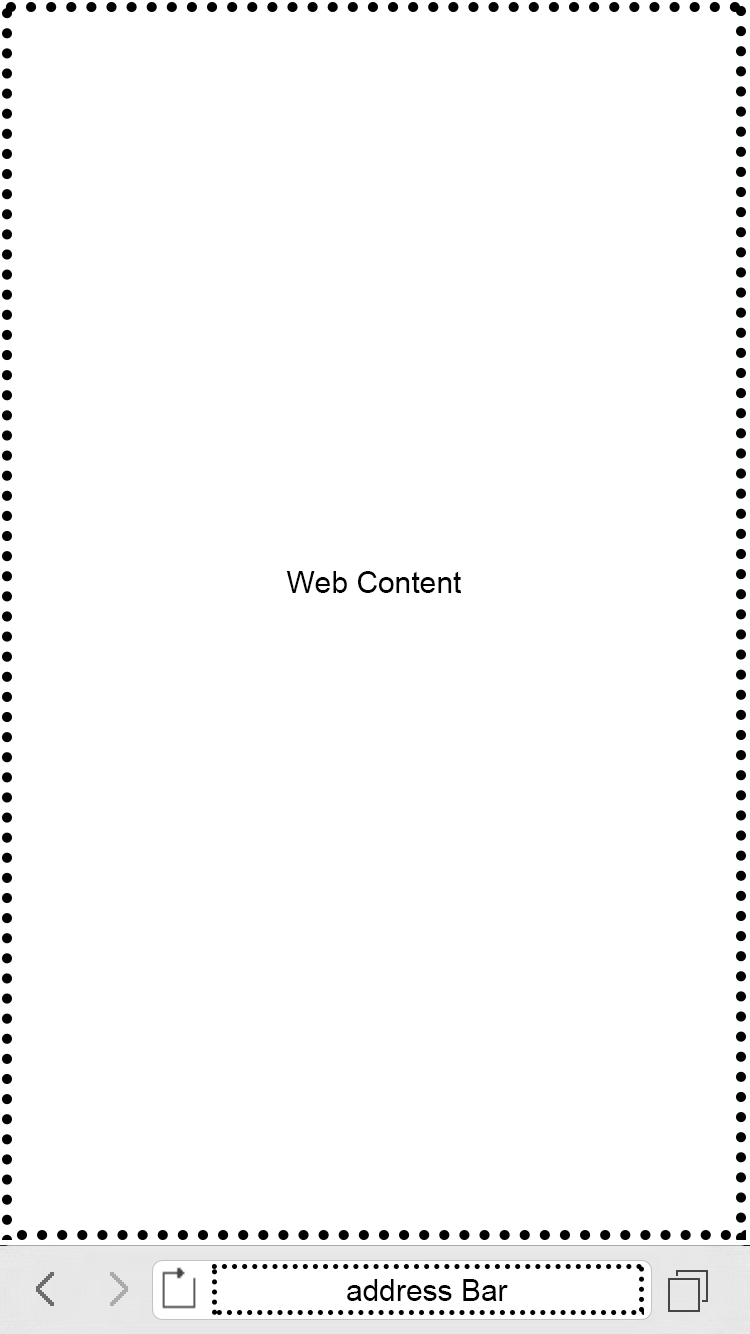
<style>
.page{position:relative;width:750px;height:1334px;background:#ffffff}
.page>*{position:absolute;margin:0}
.t1{font:30px "ArialMT";color:#000000}
</style>
<div class="page">
<p class="t1" style="left:286px;top:571px;width:175px;height:22px">Web Content</p>
<p class="t1" style="left:347px;top:1279px;width:161px;height:22px">address Bar</p>
</div>
